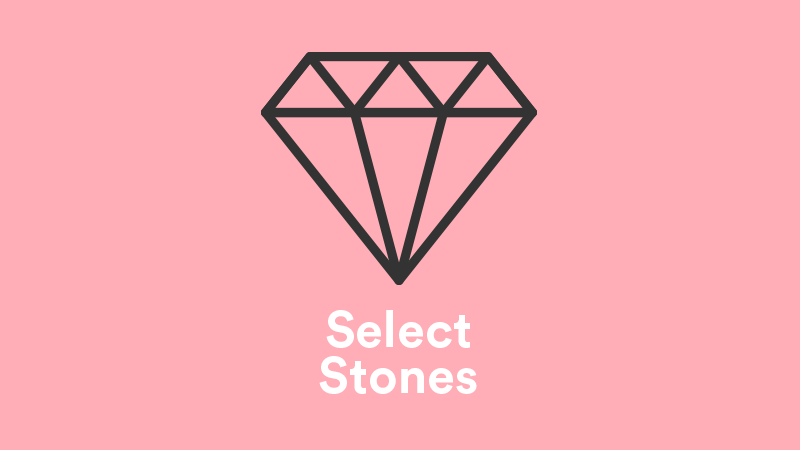
<style>
.page{position:relative;width:800px;height:450px;background:#ffadb6}
.page>*{position:absolute;margin:0}
.t1{font:50.7px/46.7px "CircularStd-Bold";color:#ffffff}
</style>
<div class="page">
<p class="t1" style="left:319px;top:310px;width:158px;height:84px;text-align:center">Select<br>Stones</p>
</div>
